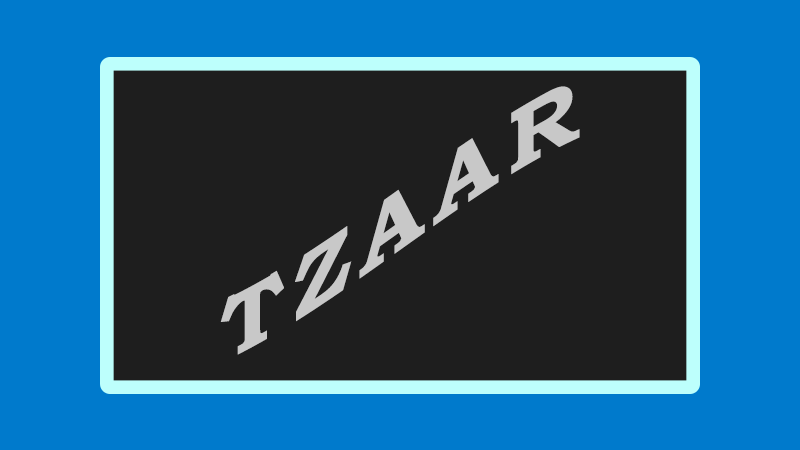
<style>
.page{position:relative;width:800px;height:450px;background:#1e1e1e}
.page>*{position:absolute;margin:0}
.t1{font:90px "BookmanOldStyle-Bold";letter-spacing:0.1em;color:#c8c8c8}
</style>
<div class="page">
<p class="t1" style="left:220px;top:86px;width:360px;height:269px;text-align:center">TZAAR</p>
</div>
